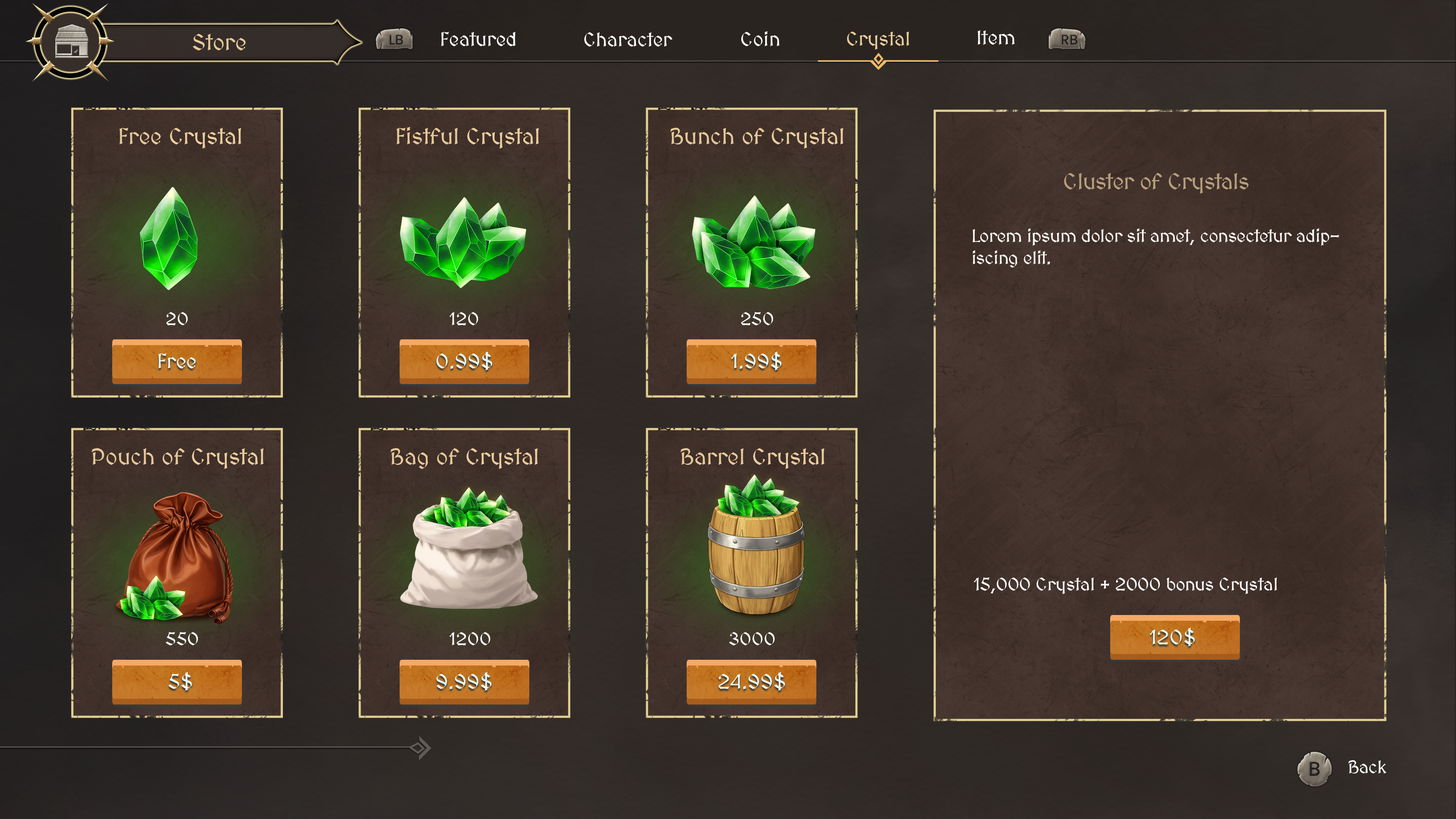
<style>
.page{position:relative;width:1456px;height:819px}
.page>*{position:absolute;margin:0}
.t1{font:22.7px "MedievalSharp";color:#e6c899}
.t2{font:19.8px "MedievalSharp";color:#ffffff}
.t3{font:19.8px "MedievalSharp";color:#ebcd9e}
.t4{font:22.7px "MedievalSharp";color:#ebcd9e}
.t5{font:22.7px "MedievalSharp";letter-spacing:-0.02em;color:#b79f7b}
.t6{font:18.2px "MedievalSharp";letter-spacing:-0.02em;color:#fffbf5}
.t7{font:18.2px "MedievalSharp";color:#ffffff}
.t8{font:20.5px "MedievalSharp";color:#e5fbfd}
.t9{font:18.2px "MedievalSharp";letter-spacing:-0.02em;color:#ffffff}
</style>
<div class="page">
<p class="t1" style="left:193px;top:34px;width:53px;height:16px">Store</p>
<p class="t2" style="left:441px;top:32px;width:75px;height:14px">Featured</p>
<p class="t2" style="left:584px;top:32px;width:89px;height:15px">Character</p>
<p class="t2" style="left:741px;top:31px;width:39px;height:15px">Coin</p>
<p class="t3" style="left:847px;top:31px;width:62px;height:19px">Crystal</p>
<p class="t2" style="left:977px;top:30px;width:38px;height:15px">Item</p>
<p class="t4" style="left:119px;top:128px;width:122px;height:21px"><span class="t1">Free </span>Crystal</p>
<p class="t1" style="left:397px;top:127px;width:142px;height:22px">Fistful <span class="t4">Crystal</span></p>
<p class="t1" style="left:670px;top:128px;width:173px;height:21px">Bunch of <span class="t4">Crystal</span></p>
<p class="t5" style="left:1064px;top:173px;width:185px;height:21px">Cluster of Crystals</p>
<p class="t6" style="left:973px;top:228px;width:366px;height:40px">Lorem ipsum dolor sit amet, consectetur adipiscing elit.</p>
<p class="t7" style="left:166px;top:312px;width:22px;height:13px">20</p>
<p class="t7" style="left:449px;top:312px;width:29px;height:13px">120</p>
<p class="t7" style="left:741px;top:312px;width:32px;height:13px">250</p>
<p class="t8" style="left:158px;top:353px;width:38px;height:16px">Free</p>
<p class="t8" style="left:436px;top:351px;width:56px;height:19px">0.99$</p>
<p class="t8" style="left:731px;top:351px;width:50px;height:19px">1.99$</p>
<p class="t1" style="left:91px;top:448px;width:173px;height:21px">Pouch of <span class="t4">Crystal</span></p>
<p class="t4" style="left:390px;top:448px;width:148px;height:21px"><span class="t1">Bag of </span>Crystal</p>
<p class="t4" style="left:680px;top:448px;width:144px;height:21px"><span class="t1">Barrel </span>Crystal</p>
<p class="t9" style="left:973px;top:577px;width:304px;height:17px">15,000 <span class="t7">Crystal</span> + 2000 bonus <span class="t7">Crystal</span></p>
<p class="t8" style="left:1149px;top:628px;width:46px;height:18px">120$</p>
<p class="t7" style="left:166px;top:632px;width:32px;height:13px">550</p>
<p class="t7" style="left:449px;top:632px;width:41px;height:13px">1200</p>
<p class="t7" style="left:729px;top:632px;width:46px;height:13px">3000</p>
<p class="t8" style="left:168px;top:672px;width:24px;height:19px">5$</p>
<p class="t8" style="left:436px;top:672px;width:55px;height:19px">9.99$</p>
<p class="t8" style="left:719px;top:672px;width:66px;height:19px">24.99$</p>
<p class="t9" style="left:1348px;top:760px;width:39px;height:13px">Back</p>
</div>
